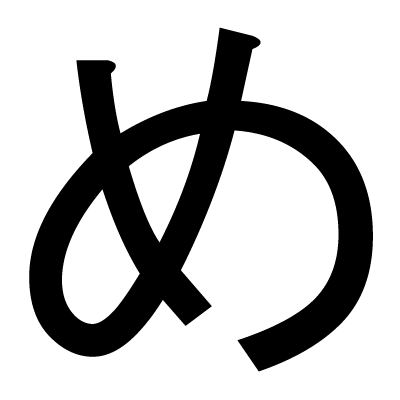
<style>
.page{position:relative;width:400px;height:400px;background:#ffffff}
.page>*{position:absolute;margin:0}
.t1{font:416.7px "MS-PGothic";color:#000000}
</style>
<div class="page">
<p class="t1" style="left:29px;top:27px;width:344px;height:345px">め</p>
</div>
